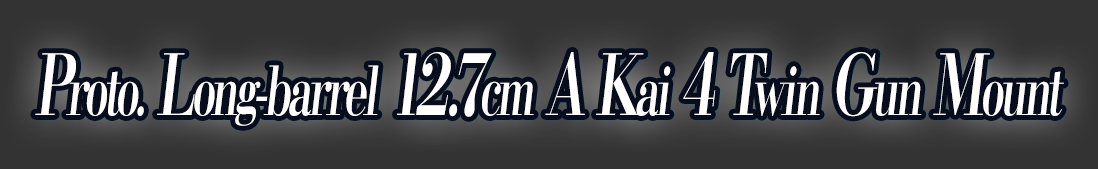
<style>
.page{position:relative;width:1098px;height:169px;background:#333333}
.page>*{position:absolute;margin:0}
.t1{font:67.2px "KochoStd-Heavy";letter-spacing:-0.08em;color:#ffffff;font-style:italic;scale:0.65 1}
.t2{font:84px "KochoStd-Heavy";letter-spacing:-0.08em;color:#ffffff;font-style:italic;scale:0.65 1}
</style>
<div class="page">
<p class="t1" style="left:35px;top:52px;width:1029px;height:74px"><span class="t2">P</span>roto.<span class="t2"> L</span>ong-barrel<span class="t2"> 12.7</span>cm<span class="t2"> A K</span>ai<span class="t2"> 4 T</span>win<span class="t2"> G</span>un<span class="t2"> M</span>ount</p>
</div>
